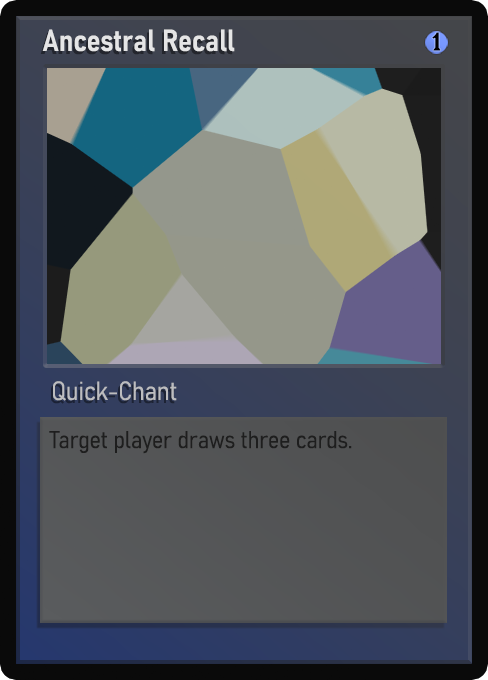
<style>
.page{position:relative;width:488px;height:680px}
.page>*{position:absolute;margin:0}
.t1{font:30px "Bahnschrift-SemiBoldSemiCondensed";color:#f2f2f2;font-weight:bold}
.t2{font:25px "WTRRoycroft";color:#000000;font-weight:bold;scale:1.09 1}
.t3{font:26px "Bahnschrift-LightSemiCondensed";color:#c8c8c8;font-weight:bold}
.t4{font:24px "Bahnschrift-LightSemiCondensed";color:#1e1e1e;font-weight:bold}
</style>
<div class="page">
<p class="t1" style="left:42px;top:29px;width:193px;height:23px;opacity:0.9">Ancestral Recall</p>
<p class="t2" style="left:432px;top:32px;width:9px;height:19px">1</p>
<p class="t3" style="left:53px;top:381px;width:124px;height:20px;opacity:0.9">Quick-Chant</p>
<p class="t4" style="left:49px;top:431px;width:303px;height:23px">Target player draws three cards.</p>
</div>
